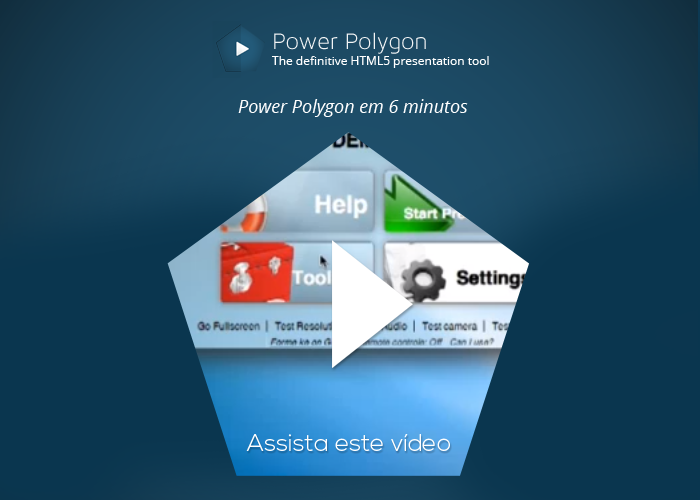
<style>
.page{position:relative;width:700px;height:500px;background:#0a364f}
.page>*{position:absolute;margin:0}
.t1{font:24px "MavenProLight300-Regular";color:#ffffff}
.t2{font:12px "OpenSans";color:#ffffff}
.t3{font:18px "OpenSans-Italic";color:#ffffff}
.t4{font:24px "NexaLight";color:#ffffff}
</style>
<div class="page">
<p class="t1" style="left:274px;top:32px;width:152px;height:22px">Power Polygon</p>
<p class="t2" style="left:272px;top:56px;width:217px;height:12px">The definitive HTML5 presentation tool</p>
<p class="t3" style="left:238px;top:99px;width:230px;height:18px">Power Polygon em 6 minutos</p>
<p class="t4" style="left:246px;top:434px;width:204px;height:17px">Assista este vídeo</p>
</div>
